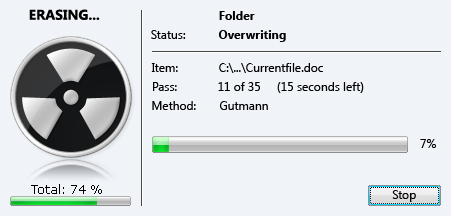
<style>
.page{position:relative;width:451px;height:216px;background:#f0f4f9}
.page>*{position:absolute;margin:0}
.t1{font:14px "SegoeUI-Bold";color:#000000}
.t2{font:12px "SegoeUI-Bold";color:#000000}
.t3{font:12px "SegoeUI";color:#000000}
.t4{font:12px "Verdana";color:#000000}
</style>
<div class="page">
<p class="t1" style="left:29px;top:9px;width:71px;height:11px">ERASING...</p>
<p class="t2" style="left:219px;top:11px;width:36px;height:9px">Folder</p>
<p class="t3" style="left:151px;top:30px;width:35px;height:9px">Status:</p>
<p class="t2" style="left:218px;top:30px;width:68px;height:12px">Overwriting</p>
<p class="t3" style="left:151px;top:63px;width:27px;height:9px">Item:</p>
<p class="t3" style="left:219px;top:63px;width:104px;height:10px">C:\...\Currentfile.doc</p>
<p class="t3" style="left:153px;top:82px;width:24px;height:9px">Pass:</p>
<p class="t3" style="left:218px;top:82px;width:146px;height:11px">11 of 35     (15 seconds left)</p>
<p class="t3" style="left:152px;top:101px;width:44px;height:9px">Method:</p>
<p class="t3" style="left:220px;top:101px;width:48px;height:9px">Gutmann</p>
<p class="t3" style="left:420px;top:139px;width:16px;height:9px">7%</p>
<p class="t4" style="left:31px;top:184px;width:71px;height:10px">Total: 74 %</p>
<p class="t3" style="left:392px;top:190px;width:24px;height:12px">Stop</p>
</div>
